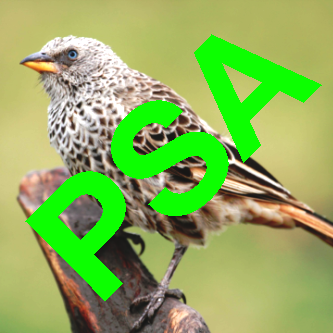
<style>
.page{position:relative;width:333px;height:333px}
.page>*{position:absolute;margin:0}
.t1{font:158px "HelveticaNeue-Bold";color:#0cff00}
</style>
<div class="page">
<p class="t1" style="left:25px;top:34px;width:297px;height:267px;rotate:-45deg">PSA</p>
</div>
